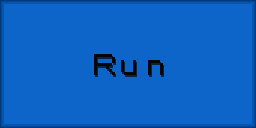
<style>
.page{position:relative;width:256px;height:128px;background:#0d65ca}
.page>*{position:absolute;margin:0}
.t1{font:24px "PokemonGB";color:#060606}
</style>
<div class="page">
<p class="t1" style="left:94px;top:54px;width:69px;height:21px">Run</p>
</div>
